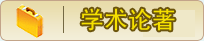
<style>
.page{position:relative;width:204px;height:41px}
.page>*{position:absolute;margin:0}
.t1{font:24px "SimHei";color:#f5e000}
</style>
<div class="page">
<p class="t1" style="left:81px;top:8px;width:94px;height:23px">学术论著</p>
</div>
